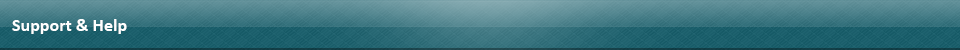
<style>
.page{position:relative;width:960px;height:50px}
.page>*{position:absolute;margin:0}
.t1{font:18px "Calibri-Bold";color:#ffffff}
</style>
<div class="page">
<p class="t1" style="left:12px;top:19px;width:115px;height:15px">Support &amp; Help</p>
</div>
